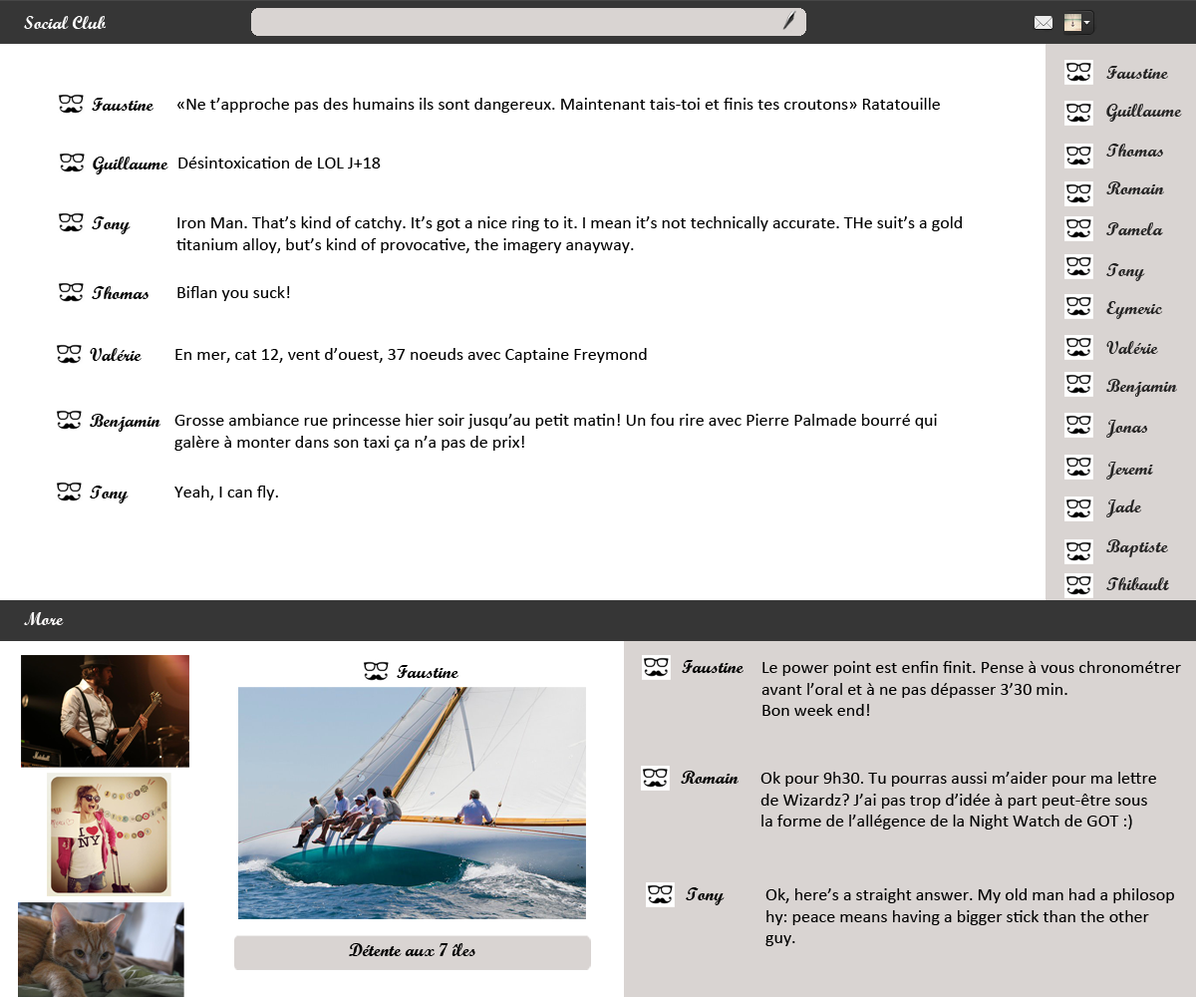
<style>
.page{position:relative;width:1196px;height:997px;background:#ffffff}
.page>*{position:absolute;margin:0}
.t1{font:17.9px "ScriptMTBold";color:#fefefe}
.t2{font:17.9px "ScriptMTBold";color:#252424}
.t3{font:17.9px "ScriptMTBold";color:#010101}
.t4{font:17.9px "Calibri";color:#010101}
.t5{font:17.9px "ScriptMTBold";color:#fefcfc}
</style>
<div class="page">
<p class="t1" style="left:24px;top:16px;width:83px;height:13px">Social Club</p>
<p class="t2" style="left:1106px;top:66px;width:62px;height:13px">Faustine</p>
<p class="t3" style="left:92px;top:98px;width:62px;height:13px">Faustine</p>
<p class="t4" style="left:177px;top:98px;width:763px;height:15px">«Ne t’approche pas des humains ils sont dangereux. Maintenant tais-toi et finis tes croutons» Ratatouille</p>
<p class="t2" style="left:1106px;top:104px;width:76px;height:18px">Guillaume</p>
<p class="t2" style="left:1106px;top:144px;width:57px;height:13px">Thomas</p>
<p class="t3" style="left:93px;top:157px;width:75px;height:17px">Guillaume</p>
<p class="t4" style="left:178px;top:157px;width:203px;height:11px">Désintoxication de LOL J+18</p>
<p class="t2" style="left:1106px;top:181px;width:58px;height:13px">Romain</p>
<p class="t3" style="left:92px;top:216px;width:39px;height:18px">Tony</p>
<p class="t4" style="left:176px;top:216px;width:786px;height:37px">Iron Man. That’s kind of catchy. It’s got a nice ring to it. I mean it’s not technically accurate. THe suit’s a gold<br>titanium alloy, but’s kind of provocative, the imagery anayway.</p>
<p class="t2" style="left:1106px;top:222px;width:57px;height:13px">Pamela</p>
<p class="t2" style="left:1106px;top:263px;width:39px;height:18px">Tony</p>
<p class="t3" style="left:92px;top:286px;width:57px;height:13px">Thomas</p>
<p class="t4" style="left:177px;top:286px;width:113px;height:15px">Biflan you suck!</p>
<p class="t2" style="left:1106px;top:301px;width:57px;height:18px">Eymeric</p>
<p class="t2" style="left:1106px;top:341px;width:52px;height:13px">Valérie</p>
<p class="t3" style="left:90px;top:348px;width:52px;height:13px">Valérie</p>
<p class="t4" style="left:175px;top:348px;width:472px;height:15px">En mer, cat 12, vent d’ouest, 37 noeuds avec Captaine Freymond</p>
<p class="t2" style="left:1106px;top:379px;width:71px;height:18px">Benjamin</p>
<p class="t3" style="left:90px;top:414px;width:70px;height:18px">Benjamin</p>
<p class="t4" style="left:174px;top:414px;width:763px;height:37px">Grosse ambiance rue princesse hier soir jusqu’au petit matin! Un fou rire avec Pierre Palmade bourré qui <br>galère à monter dans son taxi ça n’a pas de prix!</p>
<p class="t2" style="left:1106px;top:420px;width:42px;height:18px">Jonas</p>
<p class="t2" style="left:1106px;top:462px;width:47px;height:17px">Jeremi</p>
<p class="t3" style="left:90px;top:485px;width:39px;height:18px">Tony</p>
<p class="t4" style="left:174px;top:485px;width:104px;height:15px">Yeah, I can fly.</p>
<p class="t2" style="left:1106px;top:499px;width:36px;height:18px">Jade</p>
<p class="t2" style="left:1106px;top:539px;width:62px;height:18px">Baptiste</p>
<p class="t2" style="left:1106px;top:577px;width:63px;height:13px">Thibault</p>
<p class="t5" style="left:24px;top:612px;width:40px;height:13px">More</p>
<p class="t3" style="left:397px;top:665px;width:62px;height:13px">Faustine</p>
<p class="t3" style="left:682px;top:660px;width:62px;height:13px">Faustine</p>
<p class="t4" style="left:762px;top:661px;width:419px;height:55px">Le power point est enfin finit. Pense à vous chronométrer<br>avant l’oral et à ne pas dépasser 3’30 min.<br>Bon week end!</p>
<p class="t3" style="left:681px;top:771px;width:58px;height:13px">Romain</p>
<p class="t4" style="left:761px;top:772px;width:395px;height:57px">Ok pour 9h30. Tu pourras aussi m’aider pour ma lettre<br>de Wizardz? J’ai pas trop d’idée à part peut-être sous<br>la forme de l’allégence de la Night Watch de GOT :)</p>
<p class="t3" style="left:686px;top:887px;width:39px;height:18px">Tony</p>
<p class="t4" style="left:766px;top:888px;width:408px;height:58px">Ok, here’s a straight answer. My old man had a philosop<br>hy: peace means having a bigger stick than the other <br>guy.</p>
<p class="t3" style="left:349px;top:943px;width:126px;height:13px">Détente aux 7 îles</p>
</div>
